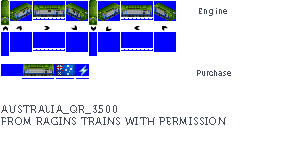
<style>
.page{position:relative;width:300px;height:159px;background:#ffffff}
.page>*{position:absolute;margin:0}
.t1{font:8px "Museo700-Regular";letter-spacing:0.075em;color:#444c5c}
.t2{font:8px "Museo700-Regular";color:#444c5c}
.t3{font:10px "Museo700-Regular";letter-spacing:0.075em;color:#444c5c;text-transform:uppercase}
</style>
<div class="page">
<p class="t1" style="left:199px;top:8px;width:28px;height:8px">Engine</p>
<p class="t2" style="left:197px;top:70px;width:34px;height:6px">Purchase</p>
<p class="t3" style="left:1px;top:105px;width:225px;height:20px">Australia_QR_3500<br>from ragins trains with permission</p>
</div>
